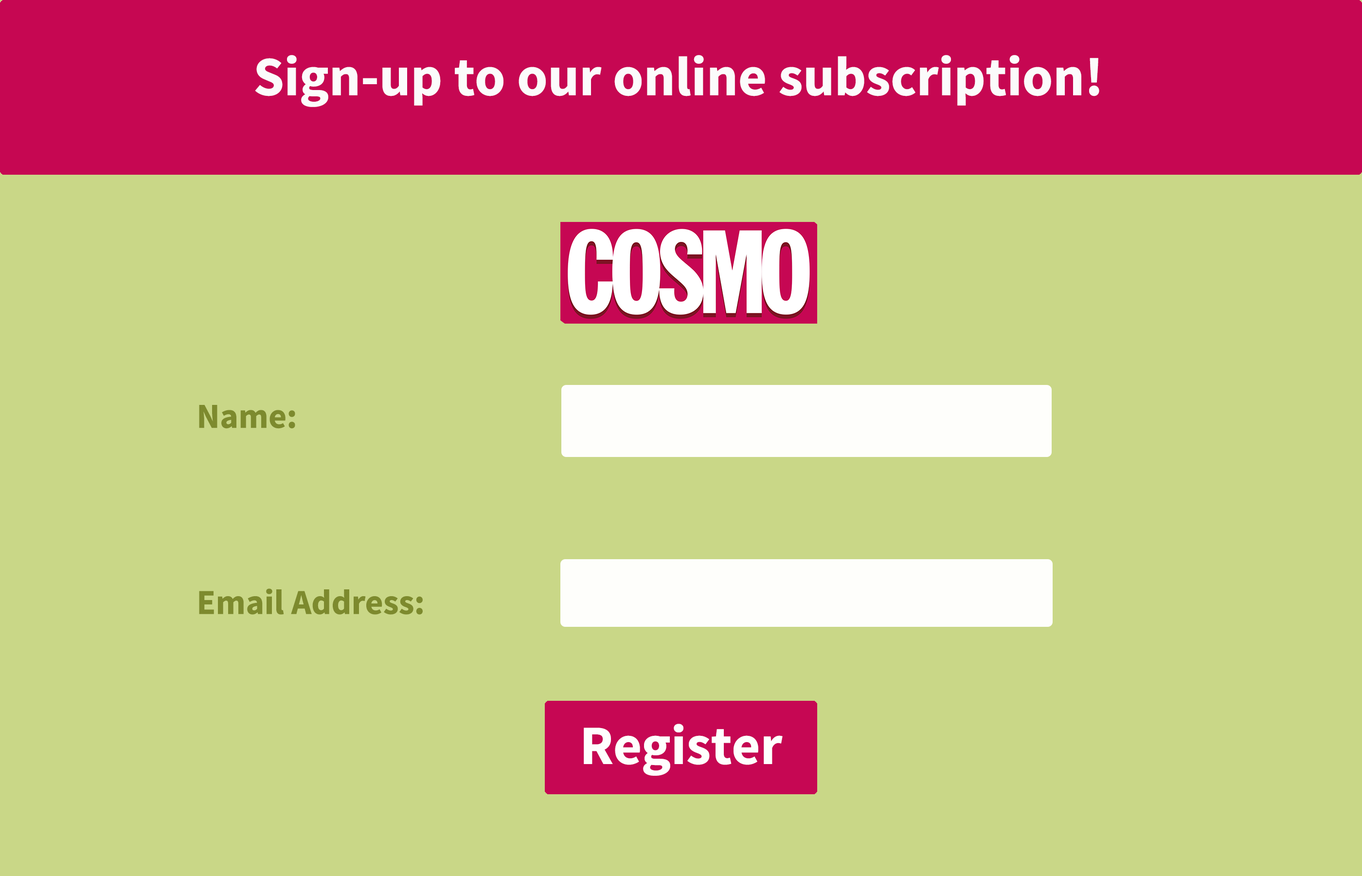
<style>
.page{position:relative;width:1362px;height:876px;background:#c9d787}
.page>*{position:absolute;margin:0}
.t1{font:55.5px "SourceSansPro-Bold";color:#fbfbfb}
.t2{font:35px "SourceSansPro-Bold";color:#7d8a2e}
.t3{font:55.5px "SourceSansPro-Bold";color:#fefefd}
</style>
<div class="page">
<p class="t1" style="left:255px;top:55px;width:844px;height:52px">Sign-up to our online subscription!</p>
<p class="t2" style="left:199px;top:405px;width:96px;height:24px">Name:</p>
<p class="t2" style="left:199px;top:588px;width:224px;height:26px">Email Address:</p>
<p class="t3" style="left:584px;top:723px;width:199px;height:52px">Register</p>
</div>
